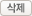
<style>
.page{position:relative;width:32px;height:16px}
.page>*{position:absolute;margin:0}
.t1{font:10.5px "YDVYGO550";letter-spacing:-0.04em;color:#666666}
</style>
<div class="page">
<p class="t1" style="left:7px;top:3px;width:18px;height:10px">삭제</p>
</div>
